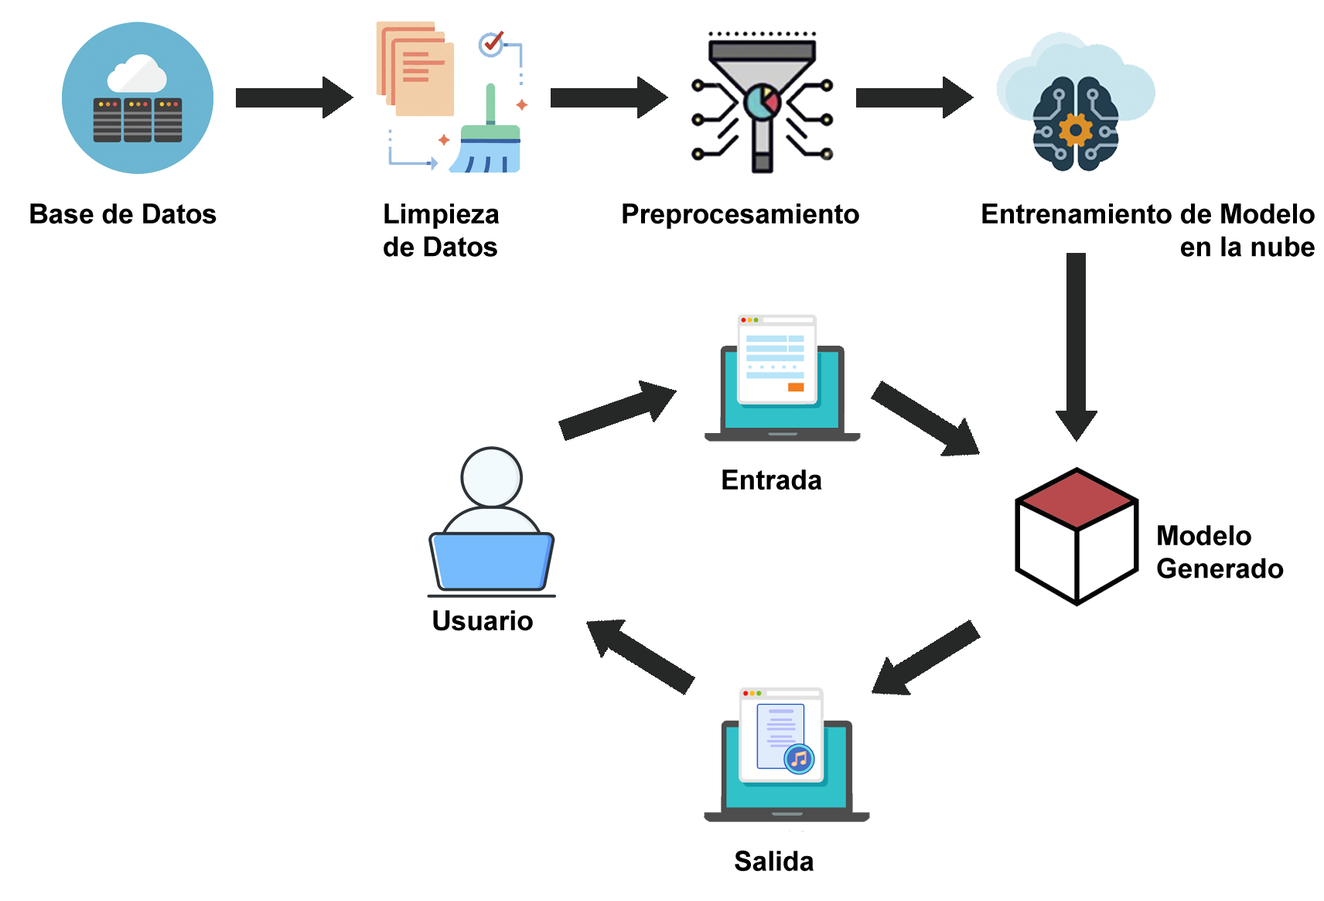
<style>
.page{position:relative;width:1324px;height:901px;background:#ffffff}
.page>*{position:absolute;margin:0}
.t1{font:27.4px "Arial-BoldMT";color:#000000}
</style>
<div class="page">
<p class="t1" style="left:30px;top:203px;width:187px;height:21px">Base de Datos</p>
<p class="t1" style="left:384px;top:203px;width:115px;height:54px">Limpieza<br>de Datos</p>
<p class="t1" style="left:622px;top:203px;width:237px;height:26px">Preprocesamiento</p>
<p class="t1" style="left:982px;top:203px;width:332px;height:54px;text-align:right">Entrenamiento de Modelo<br>         en la nube</p>
<p class="t1" style="left:722px;top:469px;width:100px;height:21px">Entrada</p>
<p class="t1" style="left:1157px;top:525px;width:127px;height:53px">Modelo<br>Generado</p>
<p class="t1" style="left:433px;top:610px;width:100px;height:21px">Usuario</p>
<p class="t1" style="left:735px;top:850px;width:78px;height:21px">Salida</p>
</div>
